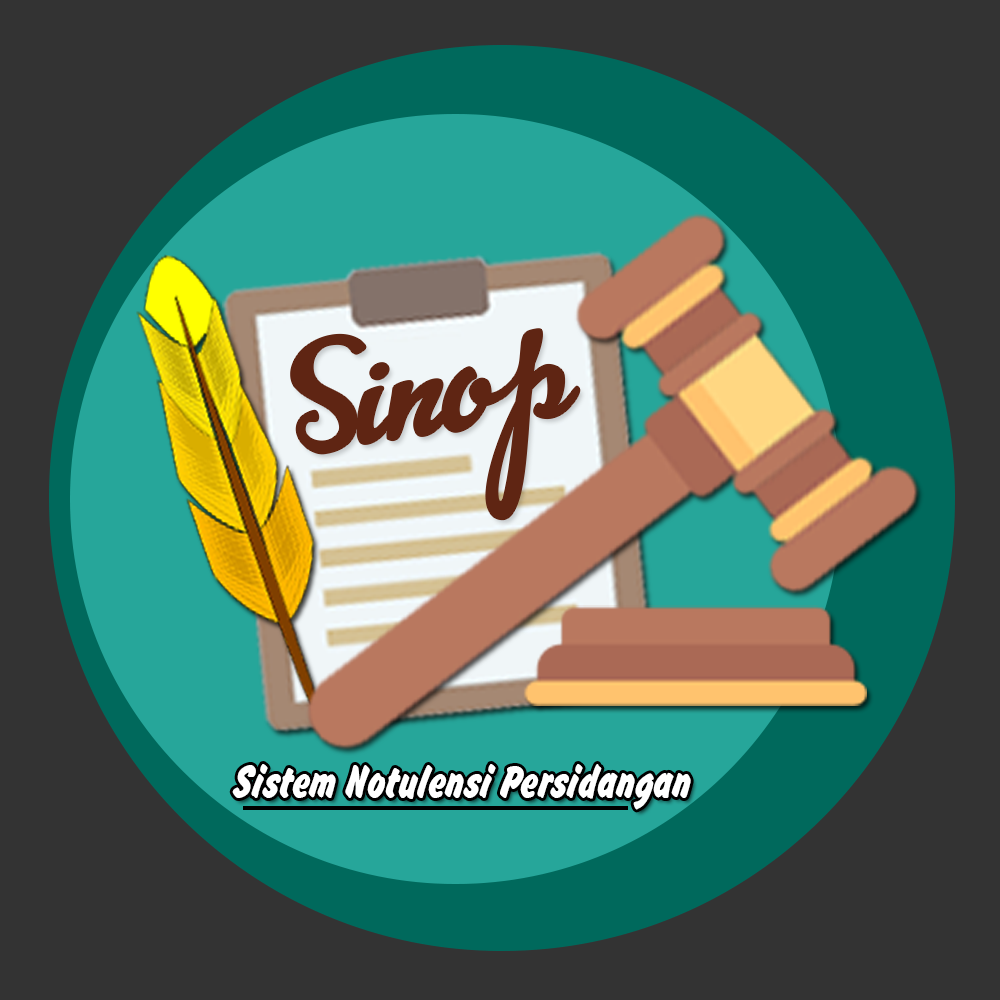
<style>
.page{position:relative;width:1000px;height:1000px;background:#333333}
.page>*{position:absolute;margin:0}
.t1{font:123.9px "AdvertisingScript-Bold";color:#5f2513}
.t2{font:49.2px "BrushHandNew";color:#ffffff;scale:0.85 1}
</style>
<div class="page">
<p class="t1" style="left:291px;top:329px;width:289px;height:191px;rotate:-8deg">Sinop</p>
<p class="t2" style="left:232px;top:764px;width:459px;height:46px">Sistem Notulensi Persidangan</p>
</div>
